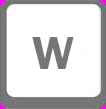
<style>
.page{position:relative;width:106px;height:109px;background:#ffffff}
.page>*{position:absolute;margin:0}
.t1{font:48px "FranklinGothic-Demi";color:#767676}
</style>
<div class="page">
<p class="t1" style="left:32px;top:37px;width:42px;height:32px">W</p>
</div>
